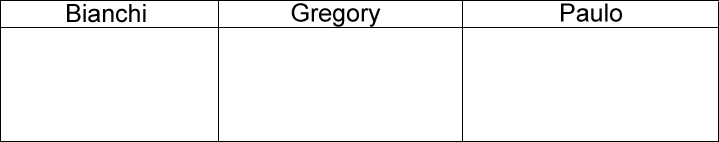
<style>
.page{position:relative;width:719px;height:142px;background:#ffffff}
.page>*{position:absolute;margin:0}
.t1{font:25px "ArialMT";color:#000000}
</style>
<div class="page">
<p class="t1" style="left:67px;top:4px;width:79px;height:19px">Bianchi</p>
<p class="t1" style="left:291px;top:3px;width:90px;height:24px">Gregory</p>
<p class="t1" style="left:561px;top:3px;width:61px;height:19px">Paulo</p>
</div>
